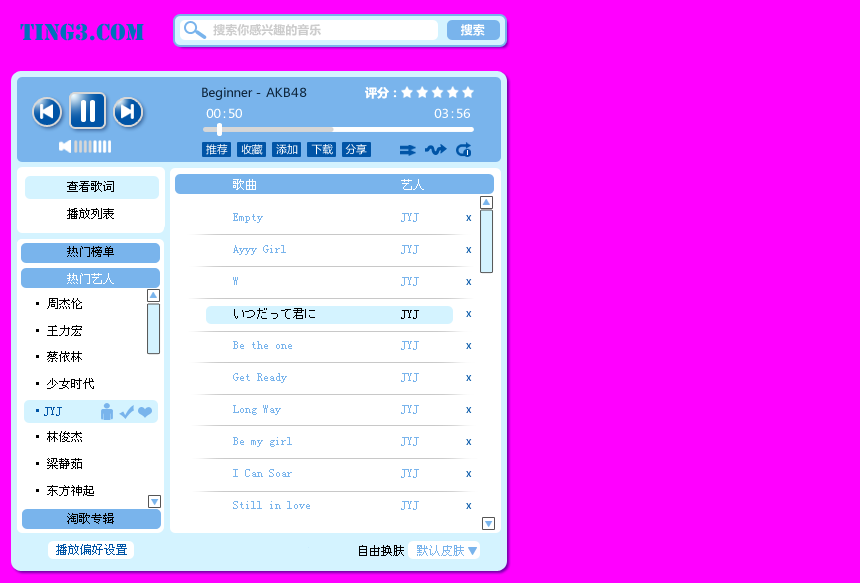
<style>
.page{position:relative;width:860px;height:583px;background:#ff00ff}
.page>*{position:absolute;margin:0}
.t1{font:24px "Stencil";color:#0071bc}
.t2{font:12px "MicrosoftYaHei";color:#cccccc}
.t3{font:12px "MicrosoftYaHei";color:#ffffff}
.t4{font:12px "MicrosoftYaHei";color:#0f273e}
.t5{font:12px "MicrosoftYaHei";letter-spacing:-0.32em;color:#0f273e}
.t6{font:12px "MicrosoftYaHei";letter-spacing:-0.4em;color:#ffffff}
.t7{font:10.7px "MicrosoftYaHei";color:#ffffff}
.t8{font:12px/26.7px "SimSun";color:#000000}
.t9{font:12px/32px "SimSun";color:#79b4ec}
.t10{font:12px/32px "SimSun";color:#ffffff}
.t11{font:12px/32px "MS-Gothic";color:#000000}
.t12{font:12px/32px "SimSun";color:#000000}
.t13{font:10.7px/32px "MicrosoftYaHei"}
.t14{font:12px/26.7px "SimSun";color:#ffffff}
.t15{font:12px/26.7px "SimSun";color:#0054a6}
.t16{font:12px "SimSun";color:#0054a6}
.t17{font:12px "SimSun";color:#000000}
.t18{font:12px "SimSun";color:#79b4ec}
</style>
<div class="page">
<p class="t1" style="left:20px;top:23px;width:124px;height:18px">Ting3.com</p>
<p class="t2" style="left:213px;top:24px;width:272px;height:12px">搜索你感兴趣的音乐                                       <span class="t3">搜索</span></p>
<p class="t4" style="left:202px;top:87px;width:105px;height:13px">Beginner－<span class="t5">ＡＫＢ４８</span></p>
<p class="t3" style="left:365px;top:86px;width:32px;height:13px">评分：</p>
<p class="t6" style="left:206px;top:108px;width:36px;height:10px">００：５０</p>
<p class="t6" style="left:434px;top:108px;width:36px;height:10px">０３：５６</p>
<p class="t7" style="left:206px;top:144px;width:161px;height:11px">推荐　 收藏　 添加　 下载    分享</p>
<p class="t8" style="left:67px;top:181px;width:47px;height:38px">查看歌词<br>播放列表</p>
<p class="t9" style="left:233px;top:179px;width:191px;height:331px"><span class="t10">歌曲                        艺人<br></span>Empty                       JYJ<br>Ayyy Girl                   JYJ<br>W                           JYJ<br><span class="t11">いつだって</span><span class="t12">君</span><span class="t11">に              </span><span class="t12">JYJ<br></span>Be the one                  JYJ<br>Get Ready                   JYJ<br>Long Way                    JYJ<br>Be my girl                  JYJ<br>I Can Soar                  JYJ<br>Still in love               JYJ</p>
<p class="t13" style="left:466px;top:215px;width:6px;height:294px">x<br>x<br>x<br>x<br>x<br>x<br>x<br>x<br>x<br>x</p>
<p class="t8" style="left:67px;top:246px;width:47px;height:278px">热门榜单<br><span class="t14">热门艺人<br></span><br><br><br><br><br><br><br><br>淘歌专辑</p>
<p class="t8" style="left:36px;top:298px;width:58px;height:198px">·周杰伦<br>·王力宏<br>·蔡依林<br>·少女时代<br><span class="t15">·JYJ<br></span>·林俊杰<br>·梁静茹<br>·东方神起</p>
<p class="t16" style="left:56px;top:544px;width:71px;height:11px">播放偏好设置</p>
<p class="t17" style="left:359px;top:545px;width:105px;height:11px">自由换肤  <span class="t18">默认皮肤</span></p>
</div>
